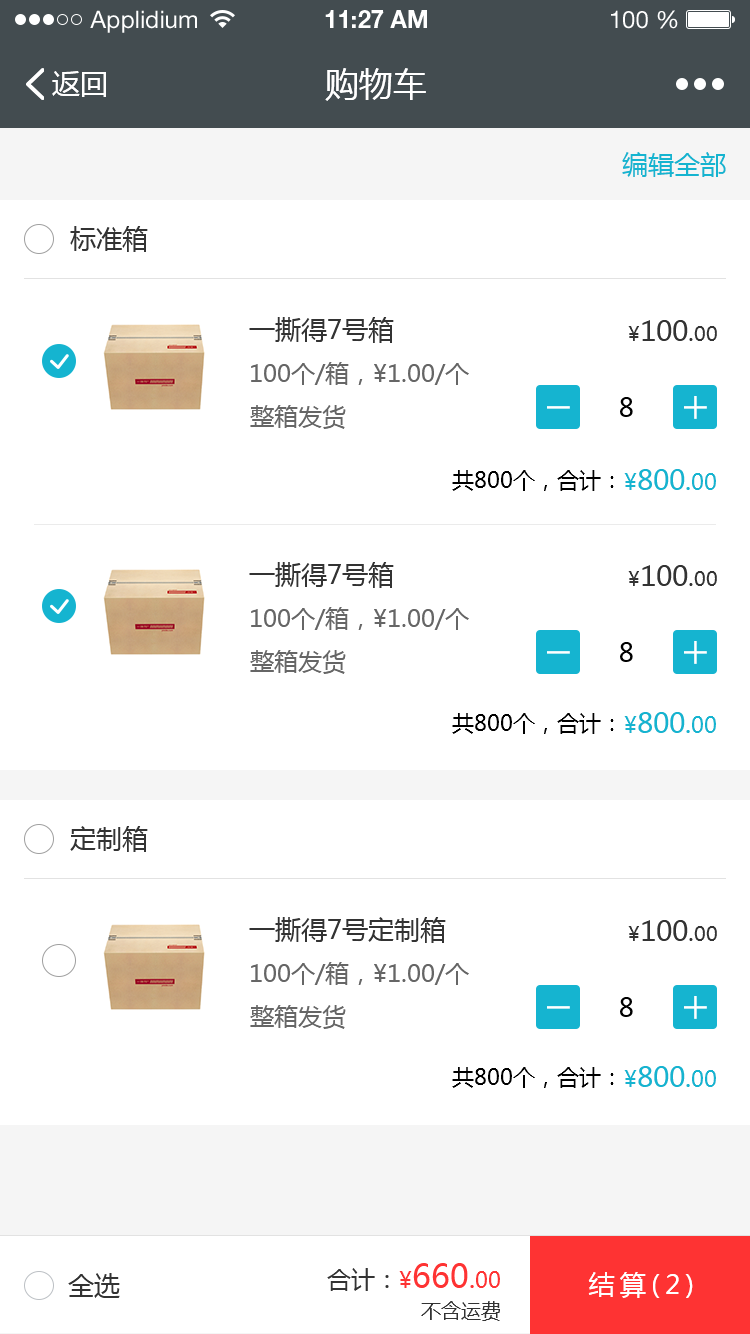
<style>
.page{position:relative;width:750px;height:1334px;background:#ffffff}
.page>*{position:absolute;margin:0}
.t1{font:24px "HelveticaNeueLTStd-Roman";color:#ffffff}
.t2{font:24px "HelveticaNeueLTStd-Bd";color:#ffffff}
.t3{font:28px "MicrosoftYaHei";color:#ffffff}
.t4{font:34px "MicrosoftYaHei";color:#ffffff}
.t5{font:26px "MicrosoftYaHei";color:#15b4d0}
.t6{font:26px "MicrosoftYaHei";color:#333333}
.t7{font:28px "MicrosoftYaHei";color:#333333}
.t8{font:20px "MicrosoftYaHei";color:#333333}
.t9{font:24px "MicrosoftYaHei";color:#333333}
.t10{font:24px "MicrosoftYaHei";color:#666666}
.t11{font:26px "MicrosoftYaHei";color:#000000}
.t12{font:22px "MicrosoftYaHei";color:#000000}
.t13{font:28px "MicrosoftYaHei";color:#15b4d0}
.t14{font:22px "MicrosoftYaHei";color:#15b4d0}
.t15{font:22px "MicrosoftYaHei";color:#fe3333}
.t16{font:32px "MicrosoftYaHei";color:#fe3333}
.t17{font:26px "MicrosoftYaHei";color:#fe3333}
.t18{font:26px "MicrosoftYaHei";letter-spacing:0.2em;color:#ffffff}
</style>
<div class="page">
<p class="t1" style="left:90px;top:10px;width:107px;height:23px">Applidium</p>
<p class="t2" style="left:325px;top:10px;width:102px;height:18px">11:27 AM</p>
<p class="t1" style="left:611px;top:10px;width:67px;height:19px">100 %</p>
<p class="t3" style="left:52px;top:71px;width:54px;height:26px">返回</p>
<p class="t4" style="left:325px;top:68px;width:101px;height:33px">购物车</p>
<p class="t5" style="left:622px;top:152px;width:104px;height:25px">编辑全部</p>
<p class="t6" style="left:70px;top:226px;width:78px;height:26px">标准箱</p>
<p class="t6" style="left:249px;top:317px;width:145px;height:26px">一撕得7号箱</p>
<p class="t7" style="left:628px;top:320px;width:89px;height:21px"><span class="t8">¥</span>100<span class="t9">.</span><span class="t8">00</span></p>
<p class="t10" style="left:251px;top:362px;width:218px;height:23px">100个/箱，¥1.00/个</p>
<p class="t11" style="left:620px;top:397px;width:13px;height:20px">8</p>
<p class="t10" style="left:250px;top:405px;width:96px;height:24px">整箱发货</p>
<p class="t12" style="left:452px;top:470px;width:162px;height:21px">共800个，合计：</p>
<p class="t13" style="left:624px;top:469px;width:92px;height:21px"><span class="t14">¥</span>800<span class="t5">.</span><span class="t14">00</span></p>
<p class="t6" style="left:249px;top:562px;width:145px;height:26px">一撕得7号箱</p>
<p class="t7" style="left:628px;top:565px;width:89px;height:21px"><span class="t8">¥</span>100<span class="t9">.</span><span class="t8">00</span></p>
<p class="t10" style="left:251px;top:607px;width:218px;height:23px">100个/箱，¥1.00/个</p>
<p class="t10" style="left:250px;top:650px;width:96px;height:24px">整箱发货</p>
<p class="t11" style="left:620px;top:642px;width:13px;height:20px">8</p>
<p class="t12" style="left:452px;top:713px;width:162px;height:21px">共800个，合计：</p>
<p class="t13" style="left:624px;top:712px;width:92px;height:21px"><span class="t14">¥</span>800<span class="t5">.</span><span class="t14">00</span></p>
<p class="t6" style="left:70px;top:826px;width:78px;height:26px">定制箱</p>
<p class="t6" style="left:249px;top:917px;width:197px;height:26px">一撕得7号定制箱</p>
<p class="t7" style="left:628px;top:920px;width:89px;height:21px"><span class="t8">¥</span>100<span class="t9">.</span><span class="t8">00</span></p>
<p class="t10" style="left:251px;top:962px;width:218px;height:23px">100个/箱，¥1.00/个</p>
<p class="t11" style="left:620px;top:997px;width:13px;height:20px">8</p>
<p class="t10" style="left:250px;top:1005px;width:96px;height:24px">整箱发货</p>
<p class="t12" style="left:452px;top:1067px;width:162px;height:21px">共800个，合计：</p>
<p class="t13" style="left:624px;top:1066px;width:92px;height:21px"><span class="t14">¥</span>800<span class="t5">.</span><span class="t14">00</span></p>
<p class="t9" style="left:327px;top:1263px;width:173px;height:28px">合计：<span class="t15">¥</span><span class="t16">660</span><span class="t17">.</span><span class="t15">00</span></p>
<p class="t6" style="left:68px;top:1273px;width:52px;height:25px">全选</p>
<p class="t18" style="left:588px;top:1272px;width:105px;height:26px">结算(2)</p>
<p class="t8" style="left:421px;top:1301px;width:79px;height:20px">不含运费</p>
</div>
